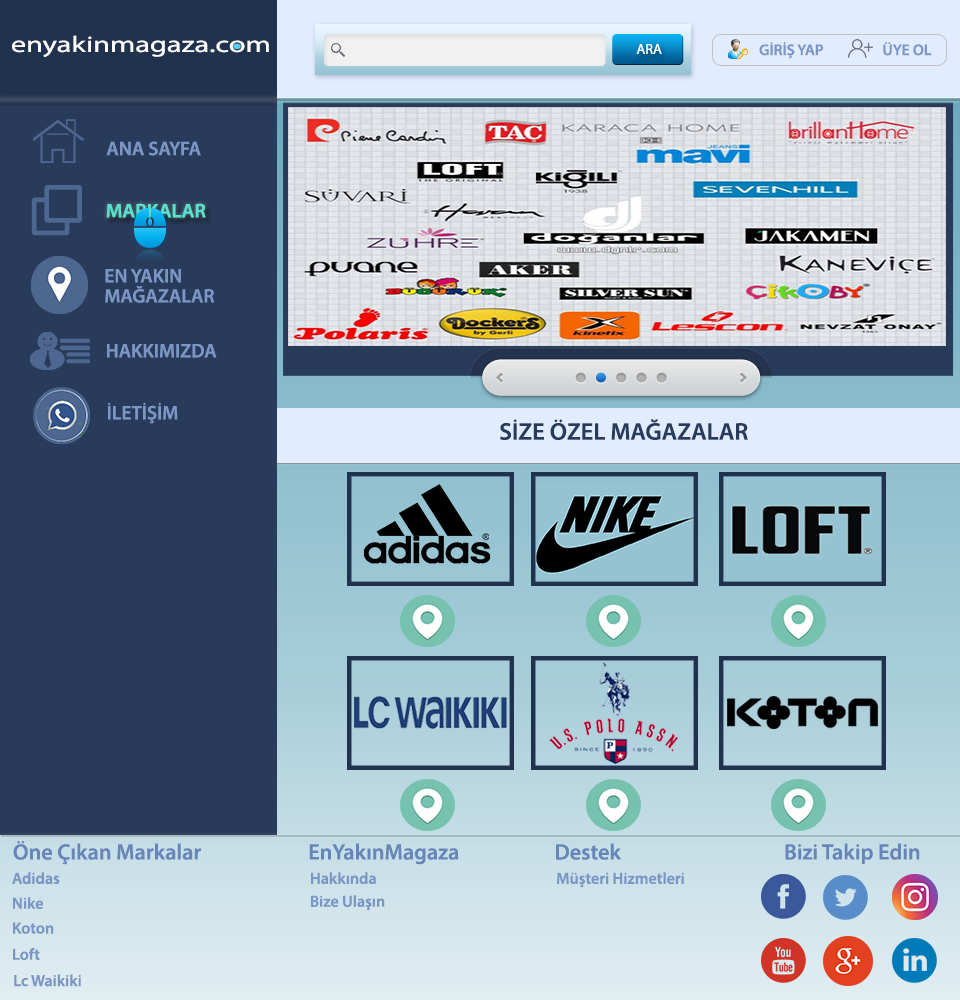
<style>
.page{position:relative;width:960px;height:1000px;background:#293b5a}
.page>*{position:absolute;margin:0}
.t1{font:22.7px "MyriadPro-Regular";color:#ffffff;scale:1.34 1}
.t2{font:14.4px "MyriadPro-Regular";color:#ffffff;text-transform:uppercase}
.t3{font:15.6px "MyriadPro-Semibold";color:#7b96c4}
.t4{font:19.6px "MyriadPro-Semibold";color:#7b96c4}
.t5{font:19.6px "MyriadPro-Semibold";color:#55e4d4;scale:1.03 1}
.t6{font:19.6px/20.1px "MyriadPro-Semibold";color:#7b96c4}
.t7{font:24.3px "MyriadPro-Semibold";color:#293b5a}
.t8{font:22.3px "MyriadPro-Semibold";color:#6785b8}
.t9{font:16.2px "MyriadPro-Semibold";color:#7b96c4}
</style>
<div class="page">
<p class="t1" style="left:12px;top:35px;width:257px;height:22px">enyakinmagaza.com</p>
<p class="t2" style="left:636px;top:44px;width:26px;height:10px">ARA</p>
<p class="t3" style="left:759px;top:42px;width:65px;height:17px">GİRİŞ YAP</p>
<p class="t3" style="left:883px;top:42px;width:49px;height:14px">ÜYE OL</p>
<p class="t4" style="left:106px;top:141px;width:95px;height:15px">ANA SAYFA</p>
<p class="t5" style="left:106px;top:203px;width:100px;height:15px">MARKALAR</p>
<p class="t6" style="left:105px;top:269px;width:110px;height:34px">EN YAKIN <br>MAĞAZALAR</p>
<p class="t4" style="left:107px;top:344px;width:110px;height:14px">HAKKIMIZDA</p>
<p class="t4" style="left:108px;top:402px;width:70px;height:22px">İLETİŞİM</p>
<p class="t7" style="left:500px;top:419px;width:248px;height:21px">SİZE ÖZEL MAĞAZALAR</p>
<p class="t8" style="left:13px;top:840px;width:188px;height:25px">Öne Çıkan Markalar</p>
<p class="t8" style="left:309px;top:843px;width:150px;height:22px">EnYakınMagaza</p>
<p class="t8" style="left:556px;top:843px;width:66px;height:17px">Destek</p>
<p class="t8" style="left:785px;top:843px;width:135px;height:21px">Bizi Takip Edin</p>
<p class="t9" style="left:12px;top:872px;width:48px;height:12px">Adidas</p>
<p class="t9" style="left:311px;top:872px;width:65px;height:12px">Hakkında</p>
<p class="t9" style="left:557px;top:872px;width:127px;height:16px">Müşteri Hizmetleri</p>
<p class="t9" style="left:13px;top:897px;width:30px;height:12px">Nike</p>
<p class="t9" style="left:311px;top:895px;width:74px;height:16px">Bize Ulaşın</p>
<p class="t9" style="left:13px;top:922px;width:41px;height:12px">Koton</p>
<p class="t9" style="left:13px;top:948px;width:27px;height:12px">Loft</p>
<p class="t9" style="left:14px;top:974px;width:67px;height:13px">Lc Waikiki</p>
</div>
